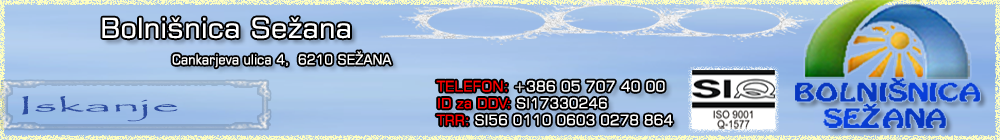
<style>
.page{position:relative;width:1000px;height:140px}
.page>*{position:absolute;margin:0}
.t1{font:27.6px "Square721BT-Roman";color:#ffffff;scale:1.05 1}
.t2{font:13.7px "Square721BT-Roman";color:#ffffff;scale:0.95 1}
.t3{font:14px "Square721BT-Roman";color:#ffffff}
.t4{font:14.4px "Square721BT-Roman";color:#ff0000}
.t5{font:14.4px "Square721BT-Roman";color:#ffffff}
.t6{font:14px "Square721BT-Roman";color:#ff0000}
.t7{font:18.7px "Papyrus-Regular";color:#2d4da0;scale:2.95 1}
</style>
<div class="page">
<p class="t1" style="left:102px;top:17px;width:248px;height:22px">Bolnišnica Sežana</p>
<p class="t2" style="left:172px;top:51px;width:220px;height:17px">Cankarjeva ulica 4,  6210 SEŽANA</p>
<p class="t3" style="left:436px;top:80px;width:237px;height:46px"><span class="t4">TELEFON:</span><span class="t5"> +386 05 707 40 00<br></span><span class="t6">ID za DDV: </span>SI17330246<br><span class="t6">TRR: </span>SI56 0110 0603 0278 864</p>
<p class="t7" style="left:22px;top:96px;width:156px;height:26px">Iskanje</p>
</div>
